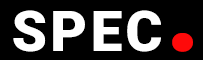
<style>
.page{position:relative;width:203px;height:60px;background:#000000}
.page>*{position:absolute;margin:0}
.t1{font:56.2px "Roboto-Black";letter-spacing:0.05em;color:#ffffff}
.t2{font:112.5px "Roboto-Black";letter-spacing:0.05em;color:#fe0a0a}
</style>
<div class="page">
<p class="t1" style="left:13px;top:10px;width:180px;height:42px">SPEC<span class="t2">.</span></p>
</div>
